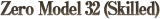
<style>
.page{position:relative;width:160px;height:19px;background:#ffffff}
.page>*{position:absolute;margin:0}
.t1{font:18px "RyuminPro-ExBold";letter-spacing:-0.08em;color:#4a3f32;font-weight:bold;scale:0.9 1}
</style>
<div class="page">
<p class="t1" style="left:0px;top:1px;width:160px;height:18px">Zero Model 32 (Skilled)</p>
</div>
